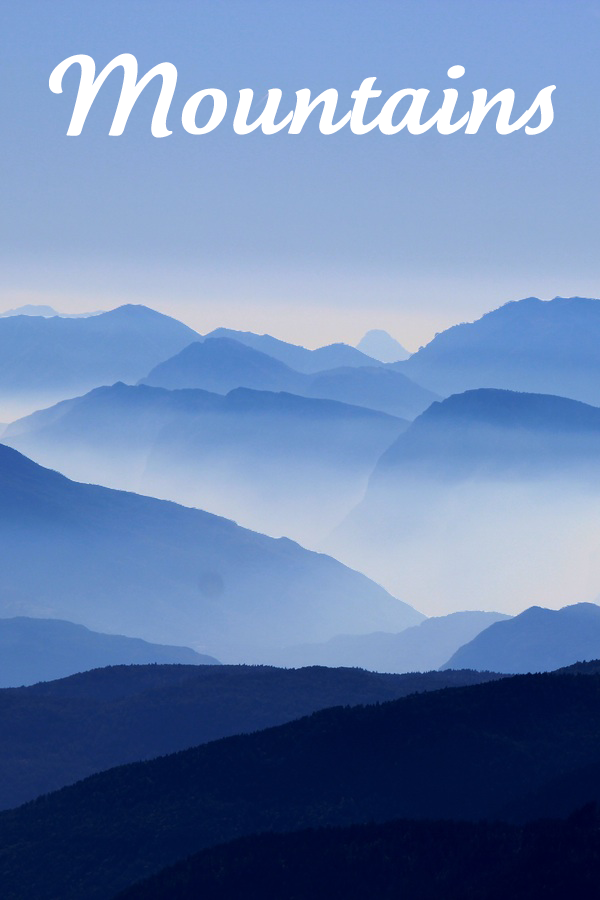
<style>
.page{position:relative;width:600px;height:900px}
.page>*{position:absolute;margin:0}
.t1{font:107px "TartineScriptRegular";color:#ffffff;font-weight:bold}
</style>
<div class="page">
<p class="t1" style="left:49px;top:53px;width:507px;height:85px">Mountains</p>
</div>
